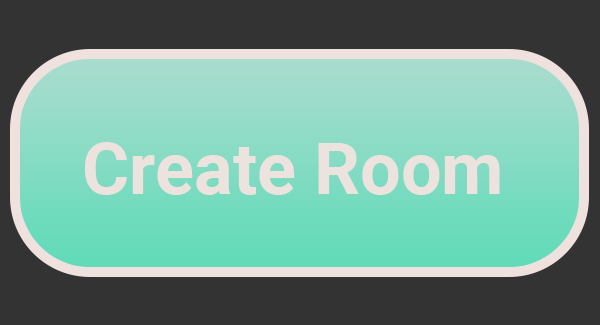
<style>
.page{position:relative;width:600px;height:325px;background:#333333}
.page>*{position:absolute;margin:0}
.t1{font:72px "Roboto-Bold";color:#ece2de}
</style>
<div class="page">
<p class="t1" style="left:85px;top:142px;width:415px;height:53px">Create Room</p>
</div>
